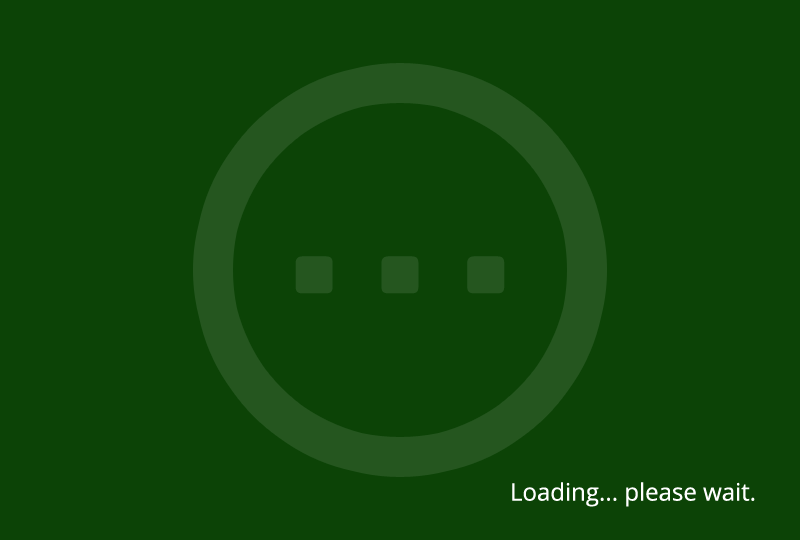
<style>
.page{position:relative;width:800px;height:540px;background:#0c4306}
.page>*{position:absolute;margin:0}
.t1{font:350px "Numans-Regular";color:#25561f}
.t2{font:24px "OpenSans";color:#ffffff}
</style>
<div class="page">
<p class="t1" style="left:295px;top:256px;width:210px;height:38px">...</p>
<p class="t2" style="left:512px;top:482px;width:243px;height:25px">Loading... please wait.</p>
</div>
